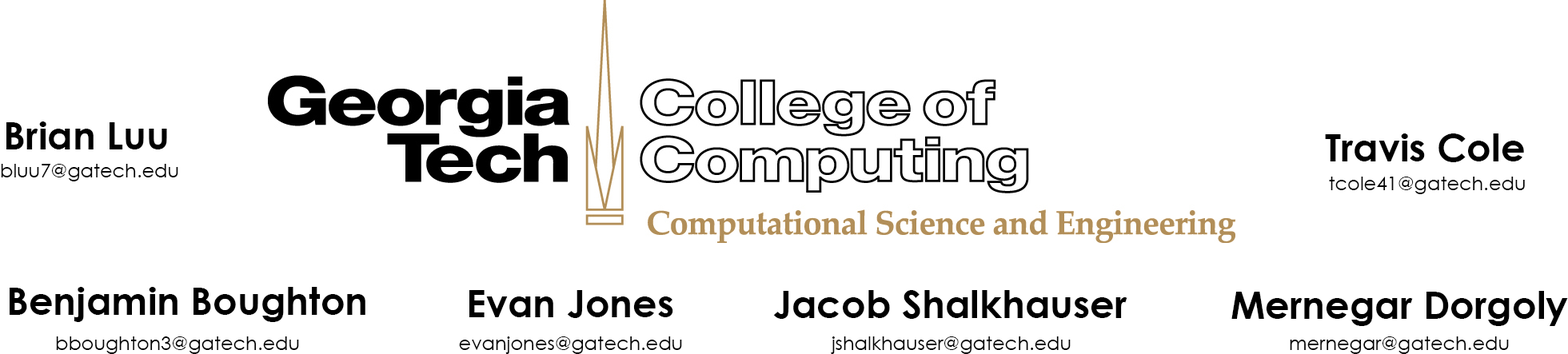
<style>
.page{position:relative;width:1568px;height:354px;background:#ffffff}
.page>*{position:absolute;margin:0}
.t1{font:38.4px "CenturyGothic-Bold";color:#000000}
.t2{font:19.2px "CenturyGothic";color:#000000}
</style>
<div class="page">
<p class="t1" style="left:6px;top:122px;width:161px;height:28px">Brian Luu</p>
<p class="t1" style="left:1325px;top:134px;width:199px;height:28px">Travis Cole</p>
<p class="t2" style="left:1px;top:164px;width:177px;height:18px">bluu7@gatech.edu</p>
<p class="t2" style="left:1329px;top:177px;width:196px;height:17px">tcole41@gatech.edu</p>
<p class="t1" style="left:10px;top:287px;width:355px;height:35px">Benjamin Boughton</p>
<p class="t1" style="left:469px;top:290px;width:204px;height:28px">Evan Jones</p>
<p class="t1" style="left:773px;top:290px;width:354px;height:29px">Jacob Shalkhauser</p>
<p class="t1" style="left:1231px;top:291px;width:337px;height:35px">Mernegar Dorgoly</p>
<p class="t2" style="left:56px;top:337px;width:243px;height:17px">bboughton3@gatech.edu</p>
<p class="t2" style="left:459px;top:337px;width:223px;height:17px">evanjones@gatech.edu</p>
<p class="t2" style="left:831px;top:337px;width:240px;height:17px">jshalkhauser@gatech.edu</p>
<p class="t2" style="left:1290px;top:337px;width:219px;height:17px">mernegar@gatech.edu</p>
</div>
